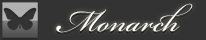
<style>
.page{position:relative;width:206px;height:40px;background:#333333}
.page>*{position:absolute;margin:0}
.t1{font:48px "BickhamScriptPro-Regular";color:#ffffff}
</style>
<div class="page">
<p class="t1" style="left:56px;top:3px;width:137px;height:30px">Monarch</p>
</div>
